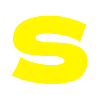
<style>
.page{position:relative;width:100px;height:100px;background:#ffffff}
.page>*{position:absolute;margin:0}
.t1{font:90px "DelaGothicOne-Regular";color:#fff600}
</style>
<div class="page">
<p class="t1" style="left:11px;top:15px;width:77px;height:69px">S</p>
</div>
